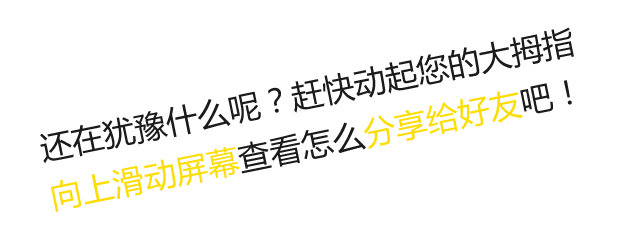
<style>
.page{position:relative;width:640px;height:225px;background:#ffffff}
.page>*{position:absolute;margin:0}
.t1{font:32px/50px "MicrosoftYaHei";color:#1b1b1b}
.t2{font:32px/50px "MicrosoftYaHei";color:#fddd05}
</style>
<div class="page">
<p class="t1" style="left:40px;top:27px;width:534px;height:185px;rotate:-11deg">还在犹豫什么呢？赶快动起您的大拇指<br><span class="t2">向上滑动屏幕</span>查看怎么<span class="t2">分享给好友</span>吧！</p>
</div>
